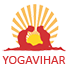
<style>
.page{position:relative;width:70px;height:70px;background:#ffffff}
.page>*{position:absolute;margin:0}
.t1{font:13px "Calibri";color:#d53033}
</style>
<div class="page">
<p class="t1" style="left:2px;top:56px;width:64px;height:8px">YOGAVIHAR</p>
</div>
